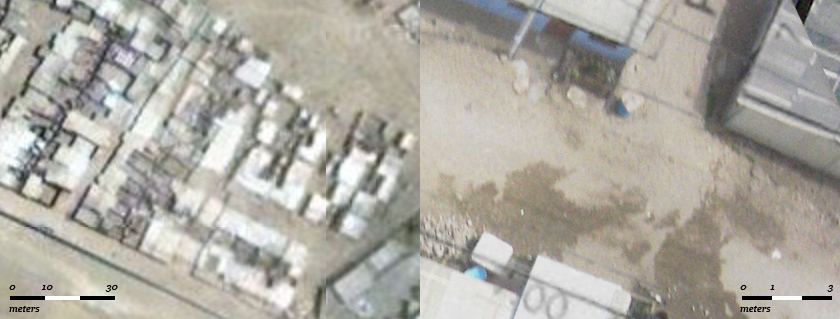
<style>
.page{position:relative;width:840px;height:319px}
.page>*{position:absolute;margin:0}
.t1{font:10px "Georgia-Italic";color:#010001}
.t2{font:10px "Georgia-Italic";letter-spacing:0.02em;color:#010001}
</style>
<div class="page">
<p class="t1" style="left:9px;top:285px;width:109px;height:27px">0           <span class="t2">10</span>                      30<br><br>meters</p>
<p class="t1" style="left:740px;top:285px;width:93px;height:27px">0          1                      3<br><br>meters</p>
</div>
